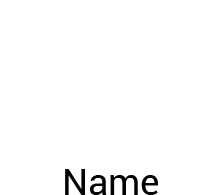
<style>
.page{position:relative;width:224px;height:195px;background:#ffffff}
.page>*{position:absolute;margin:0}
.t1{font:36.7px "Roboto-Regular";color:#000000}
</style>
<div class="page">
<p class="t1" style="left:65px;top:169px;width:93px;height:26px">Name</p>
</div>
